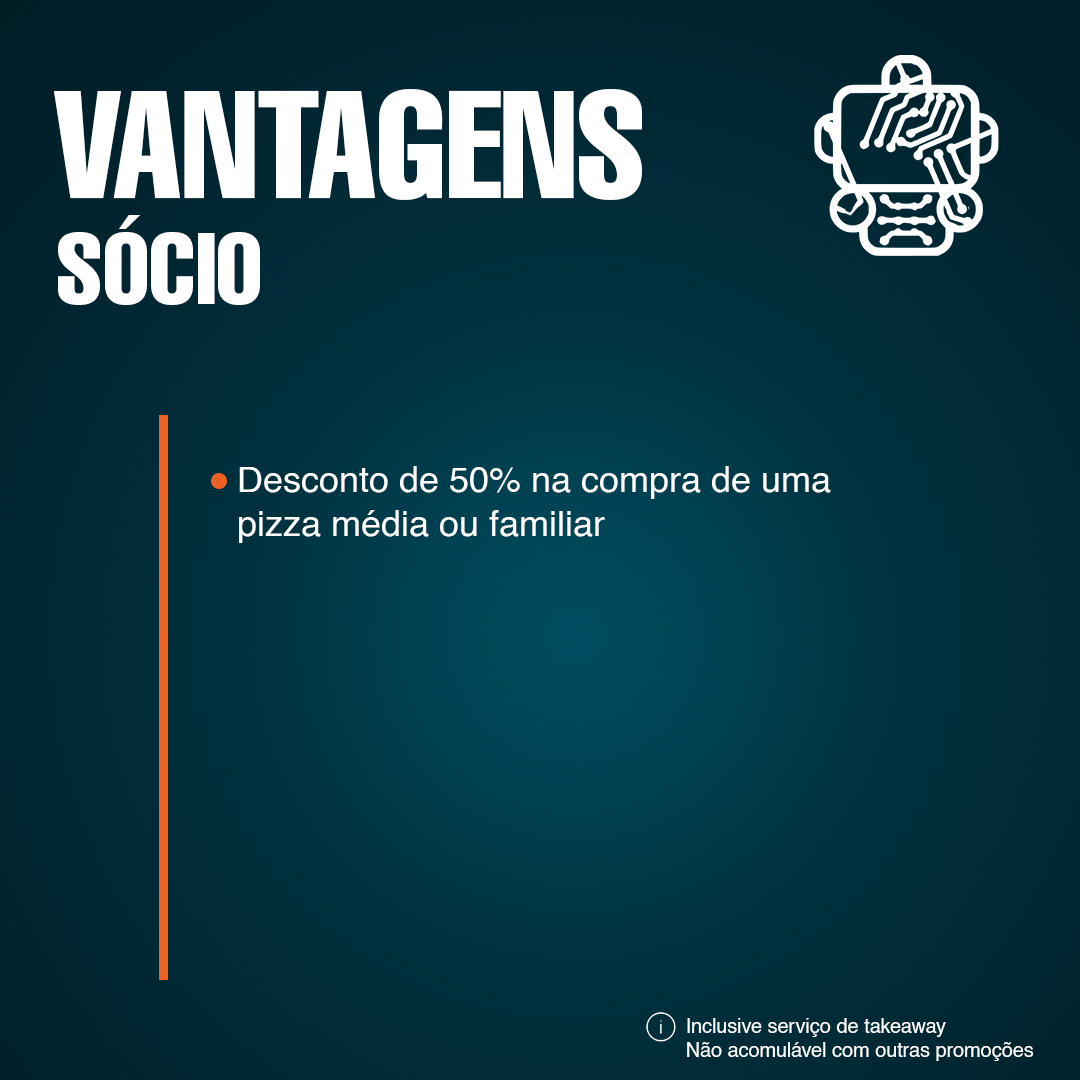
<style>
.page{position:relative;width:1080px;height:1080px}
.page>*{position:absolute;margin:0}
.t1{font:150px "Helvetica-Compressed";color:#ffffff}
.t2{font:100px "Helvetica-Compressed";color:#ffffff}
.t3{font:36px "Helvetica";color:#ffffff}
.t4{font:20px "Helvetica";color:#ffffff}
</style>
<div class="page">
<p class="t1" style="left:54px;top:89px;width:588px;height:111px">VANTAGENS</p>
<p class="t2" style="left:58px;top:215px;width:202px;height:90px">SÓCIO</p>
<p class="t3" style="left:239px;top:466px;width:592px;height:77px">Desconto de 50% na compra de uma pizza média ou familiar</p>
<p class="t4" style="left:687px;top:1018px;width:347px;height:43px">Inclusive serviço de takeaway<br>Não acomulável com outras promoções</p>
</div>
